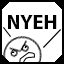
<style>
.page{position:relative;width:64px;height:64px;background:#ffffff}
.page>*{position:absolute;margin:0}
.t1{font:20.8px "MyriadPro-Bold";color:#000000}
</style>
<div class="page">
<p class="t1" style="left:8px;top:15px;width:49px;height:14px">NYEH</p>
</div>
